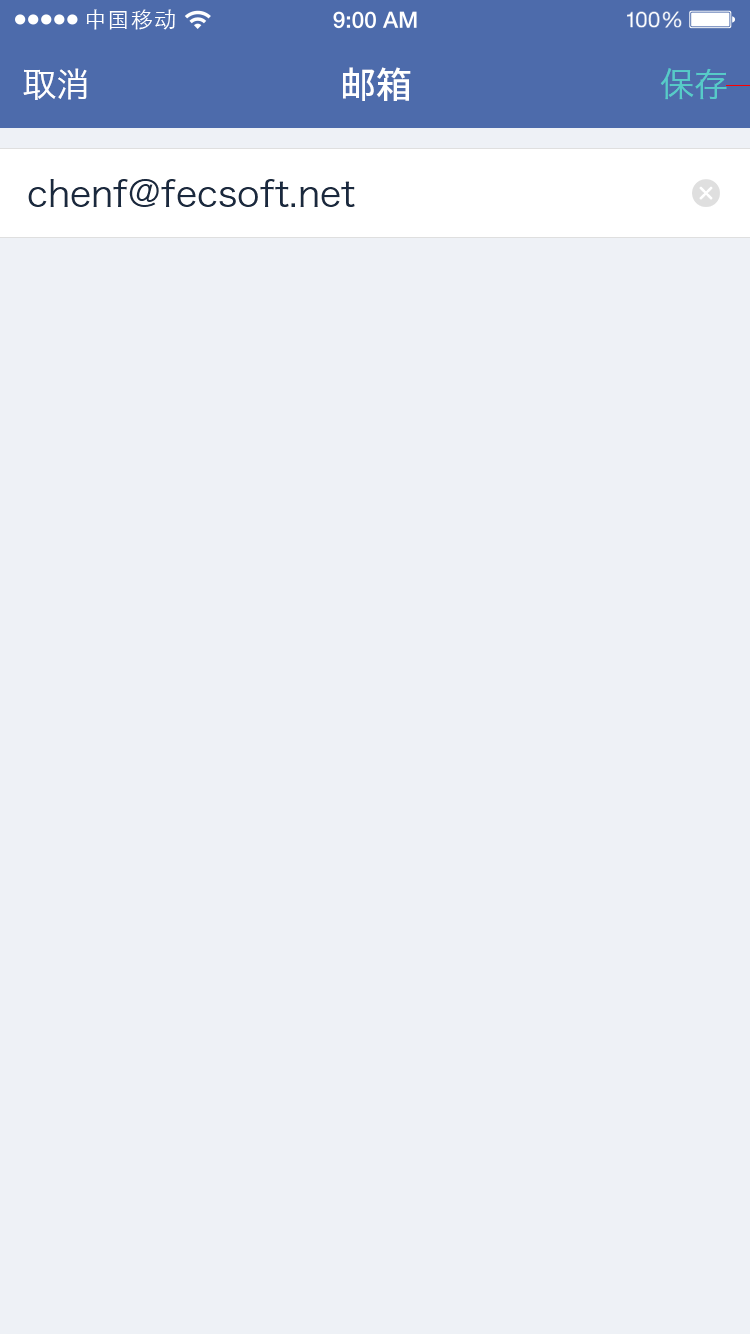
<style>
.page{position:relative;width:750px;height:1334px;background:#eef1f6}
.page>*{position:absolute;margin:0}
.t1{font:21.9px "STXihei";letter-spacing:0.04em;color:#ffffff}
.t2{font:34px "HiraginoSansGB-W3";color:#ffffff}
.t3{font:36px "NotoSansHans-Medium";color:#ffffff}
.t4{font:34px "HiraginoSansGB-W3";color:#57cbc8}
.t5{font:36px "HiraginoSansGB-W3";color:#1a293e}
</style>
<div class="page">
<p class="t1" style="left:86px;top:9px;width:89px;height:21px">中国移动</p>
<p class="t2" style="left:23px;top:68px;width:64px;height:32px">取消</p>
<p class="t3" style="left:343px;top:67px;width:68px;height:34px">邮箱</p>
<p class="t4" style="left:660px;top:68px;width:67px;height:32px">保存</p>
<p class="t5" style="left:28px;top:179px;width:327px;height:28px">chenf@fecsoft.net</p>
</div>
